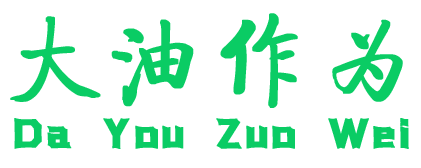
<style>
.page{position:relative;width:421px;height:168px;background:#ffffff}
.page>*{position:absolute;margin:0}
.t1{font:100px "FZQTJW--GB1-0";letter-spacing:0.025em;color:#0acc64;font-weight:bold}
.t2{font:48px "076-SSZhanRenTi";letter-spacing:0.05em;color:#0acc64;font-weight:bold}
</style>
<div class="page">
<p class="t1" style="left:10px;top:13px;width:393px;height:95px">大油作为</p>
<p class="t2" style="left:14px;top:118px;width:395px;height:31px">Da You Zuo Wei</p>
</div>
